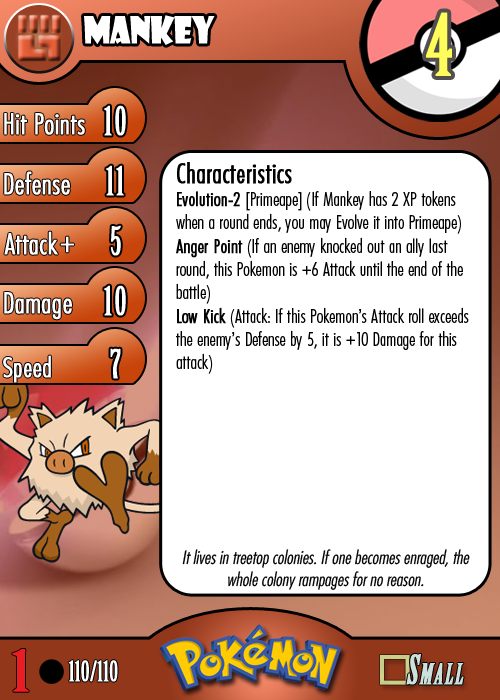
<style>
.page{position:relative;width:500px;height:700px;background:#ffffff}
.page>*{position:absolute;margin:0}
.t1{font:36.7px "ShowcardGothic-Reg";letter-spacing:-0.025em;color:#ffffff;scale:0.91 1}
.t2{font:83.3px "BirchStd";letter-spacing:0.025em;color:#fffd59;font-weight:bold}
.t3{font:27.8px "Futura-CondensedLight";color:#ffffff;font-weight:bold}
.t4{font:38.9px "BirchStd";letter-spacing:0.035em;color:#ffffff;font-weight:bold}
.t5{font:19.4px "FuturaCondensedBQ-Light";color:#010101}
.t6{font:27.8px "FuturaCondensedBQ-Light";color:#010101;font-weight:bold}
.t7{font:19.4px "FuturaCondensedBQ-Light";color:#010101;font-weight:bold}
.t8{font:30.6px "Futura-CondensedLight";color:#ffffff;font-weight:bold}
.t9{font:27.8px "FuturaCondensedBQ-Light";color:#ffffff;font-weight:bold}
.t10{font:18.1px "Futura-CondensedLight";color:#010101;font-style:italic}
.t11{font:55.6px "BirchStd";color:#ed1c24;font-weight:bold;scale:1.5 1}
.t12{font:27.8px "BirchStd";color:#ffffff;font-weight:bold}
</style>
<div class="page">
<p class="t1" style="left:84px;top:15px;width:131px;height:30px">mankey</p>
<p class="t2" style="left:426px;top:12px;width:26px;height:64px">4</p>
<p class="t3" style="left:4px;top:113px;width:81px;height:22px">Hit Points</p>
<p class="t4" style="left:104px;top:105px;width:22px;height:31px">10</p>
<p class="t3" style="left:4px;top:171px;width:66px;height:24px">Defense</p>
<p class="t4" style="left:106px;top:165px;width:18px;height:31px">11</p>
<p class="t5" style="left:176px;top:162px;width:293px;height:212px"><span class="t6">Characteristics<br></span><span class="t7">Evolution-2 </span>[Primeape] (If Mankey has 2 XP tokens when a round ends, you may Evolve it into Primeape)<br><span class="t7">Anger Point</span> (If an enemy knocked out an ally last round, this Pokemon is +6 Attack until the end of the battle)<br><span class="t7">Low Kick</span> (Attack: If this Pokemon’s Attack roll exceeds the enemy’s Defense by 5, it is +10 Damage for this attack)</p>
<p class="t3" style="left:4px;top:231px;width:54px;height:24px">Attack</p>
<p class="t4" style="left:111px;top:225px;width:10px;height:31px">5</p>
<p class="t8" style="left:60px;top:236px;width:14px;height:17px">+</p>
<p class="t3" style="left:4px;top:292px;width:68px;height:28px">Damage</p>
<p class="t4" style="left:104px;top:285px;width:22px;height:31px">10</p>
<p class="t4" style="left:110px;top:348px;width:11px;height:31px">7</p>
<p class="t9" style="left:3px;top:355px;width:48px;height:28px">Speed</p>
<p class="t10" style="left:182px;top:549px;width:288px;height:41px;text-align:center">It lives in treetop colonies. If one becomes enraged, the whole colony rampages for no reason.</p>
<p class="t11" style="left:12px;top:649px;width:17px;height:43px">1</p>
<p class="t12" style="left:68px;top:660px;width:50px;height:22px">110/110</p>
</div>
